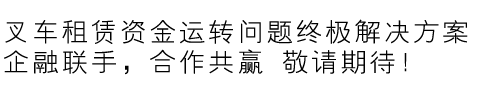
<style>
.page{position:relative;width:480px;height:89px;background:#ffffff}
.page>*{position:absolute;margin:0}
.t1{font:26px/30px "FZYXJW--GB1-0";letter-spacing:0.1em;color:#000000;font-weight:bold}
</style>
<div class="page">
<p class="t1" style="left:4px;top:19px;width:464px;height:56px">叉车租赁资金运转问题终极解决方案 <br>企融联手，合作共赢 敬请期待！</p>
</div>
